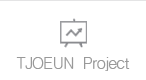
<style>
.page{position:relative;width:146px;height:80px;background:#ffffff}
.page>*{position:absolute;margin:0}
.t1{font:16px "Haansoft-Dotum";letter-spacing:-0.05em;color:#999999}
</style>
<div class="page">
<p class="t1" style="left:16px;top:57px;width:114px;height:14px">TJOEUN  Project</p>
</div>
